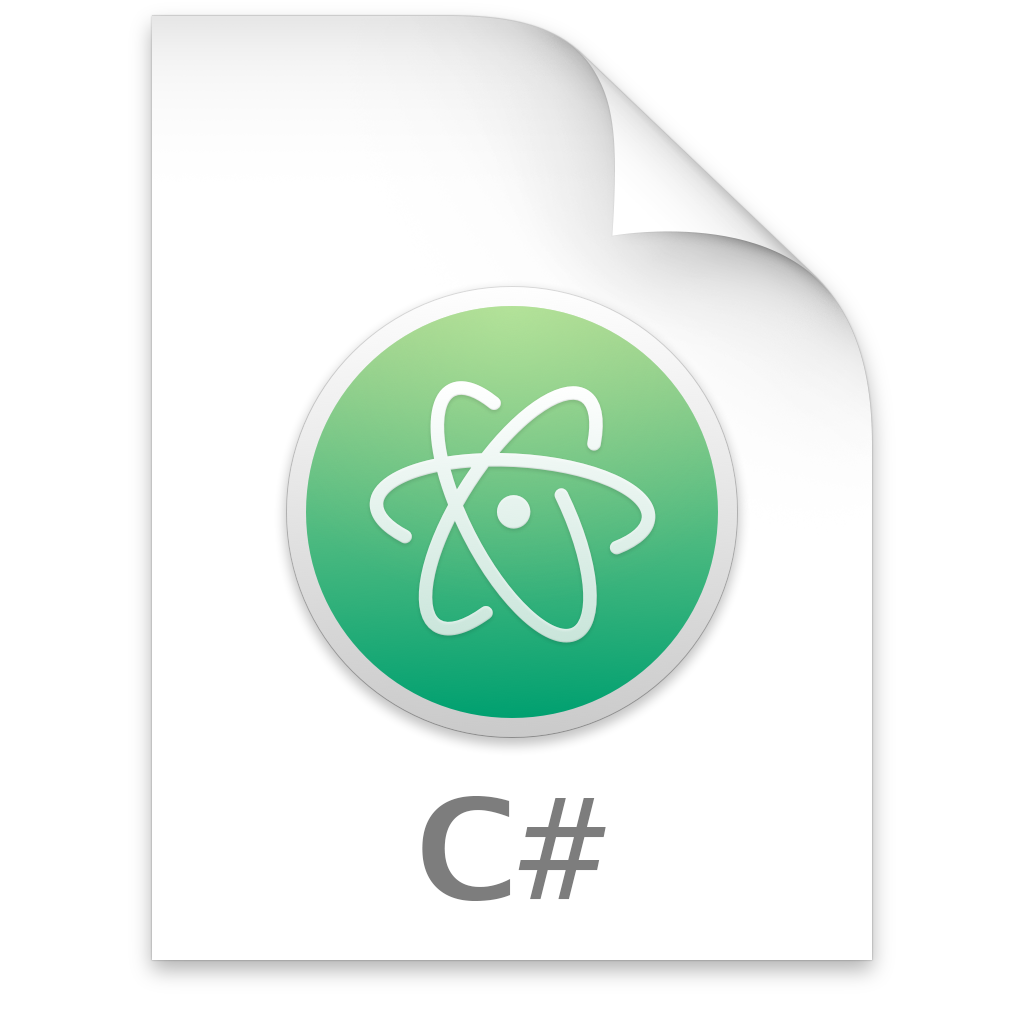
<style>
.page{position:relative;width:1024px;height:1024px;background:#ffffff}
.page>*{position:absolute;margin:0}
.t1{font:140px "LucidaGrande-Bold";color:#7d7d7d}
</style>
<div class="page">
<p class="t1" style="left:422px;top:796px;width:184px;height:105px">C#</p>
</div>
